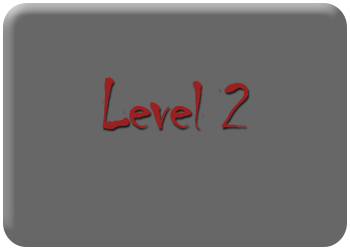
<style>
.page{position:relative;width:350px;height:250px;background:#676767}
.page>*{position:absolute;margin:0}
.t1{font:71.8px "Chiller-Regular";letter-spacing:-0.025em;color:#992122}
</style>
<div class="page">
<p class="t1" style="left:101px;top:77px;width:147px;height:52px">Level 2</p>
</div>
